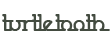
<style>
.page{position:relative;width:110px;height:47px;background:#ffffff}
.page>*{position:absolute;margin:0}
.t1{font:22px "PowderworksBRK";color:#434b40}
</style>
<div class="page">
<p class="t1" style="left:2px;top:14px;width:108px;height:17px">turtletooth</p>
</div>
